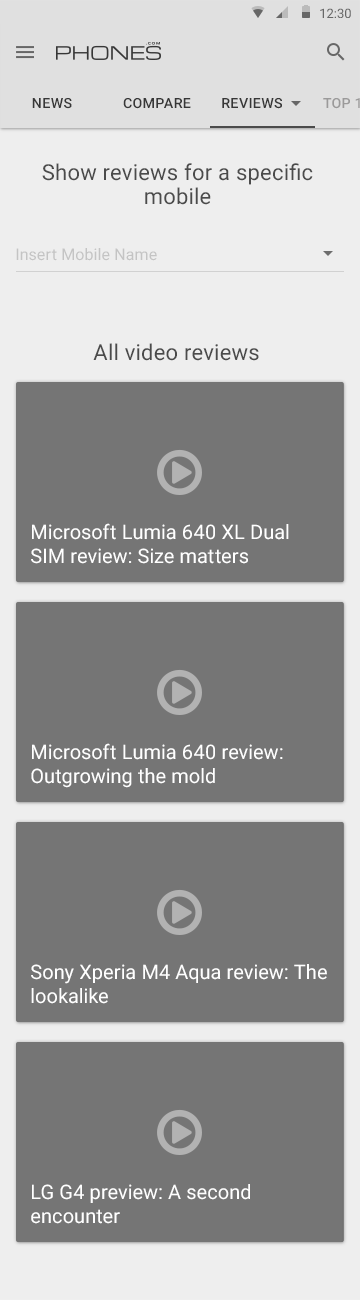
<style>
.page{position:relative;width:360px;height:1300px;background:#757575}
.page>*{position:absolute;margin:0}
.t1{font:14px "Roboto-Medium";letter-spacing:0.01em;color:#373737}
.t2{font:22px/24px "Roboto-Regular";letter-spacing:0.01em;color:#4b4b4b}
.t3{font:16px "Roboto-Regular";letter-spacing:0.01em;color:#c4c4c4}
.t4{font:22px "Roboto-Regular";letter-spacing:0.01em;color:#4b4b4b}
.t5{font:20px/24px "Roboto-Regular";letter-spacing:0.005em;color:#ffffff}
</style>
<div class="page">
<p class="t1" style="left:32px;top:98px;width:40px;height:11px">NEWS</p>
<p class="t1" style="left:123px;top:98px;width:68px;height:11px">COMPARE</p>
<p class="t1" style="left:222px;top:98px;width:60px;height:11px">REVIEWS</p>
<p class="t2" style="left:42px;top:163px;width:271px;height:42px;text-align:center">Show reviews for a specific<br>mobile</p>
<p class="t3" style="left:16px;top:248px;width:141px;height:13px">Insert Mobile Name</p>
<p class="t4" style="left:93px;top:343px;width:166px;height:18px">All video reviews</p>
<p class="t5" style="left:31px;top:523px;width:258px;height:41px">Microsoft Lumia 640 XL Dual SIM review: Size matters</p>
<p class="t5" style="left:31px;top:743px;width:252px;height:45px">Microsoft Lumia 640 review: Outgrowing the mold</p>
<p class="t5" style="left:31px;top:964px;width:296px;height:40px">Sony Xperia M4 Aqua review: The lookalike</p>
<p class="t5" style="left:31px;top:1184px;width:219px;height:40px">LG G4 preview: A second encounter</p>
</div>
